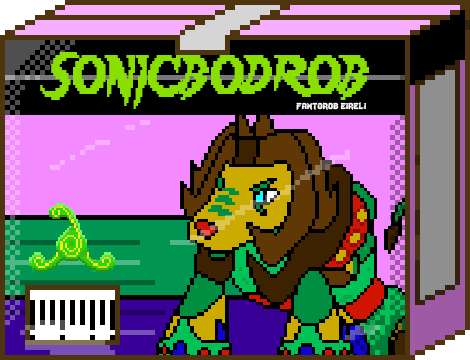
<style>
.page{position:relative;width:470px;height:360px}
.page>*{position:absolute;margin:0}
.t1{font:48px "Lady-Radical";color:#88df00;scale:0.72 1}
.t2{font:12px "Lady-Radical";color:#fbfbfb}
</style>
<div class="page">
<p class="t1" style="left:40px;top:52px;width:329px;height:57px">SONICBODROB</p>
<p class="t2" style="left:296px;top:102px;width:70px;height:8px">fantorob eireli</p>
</div>
